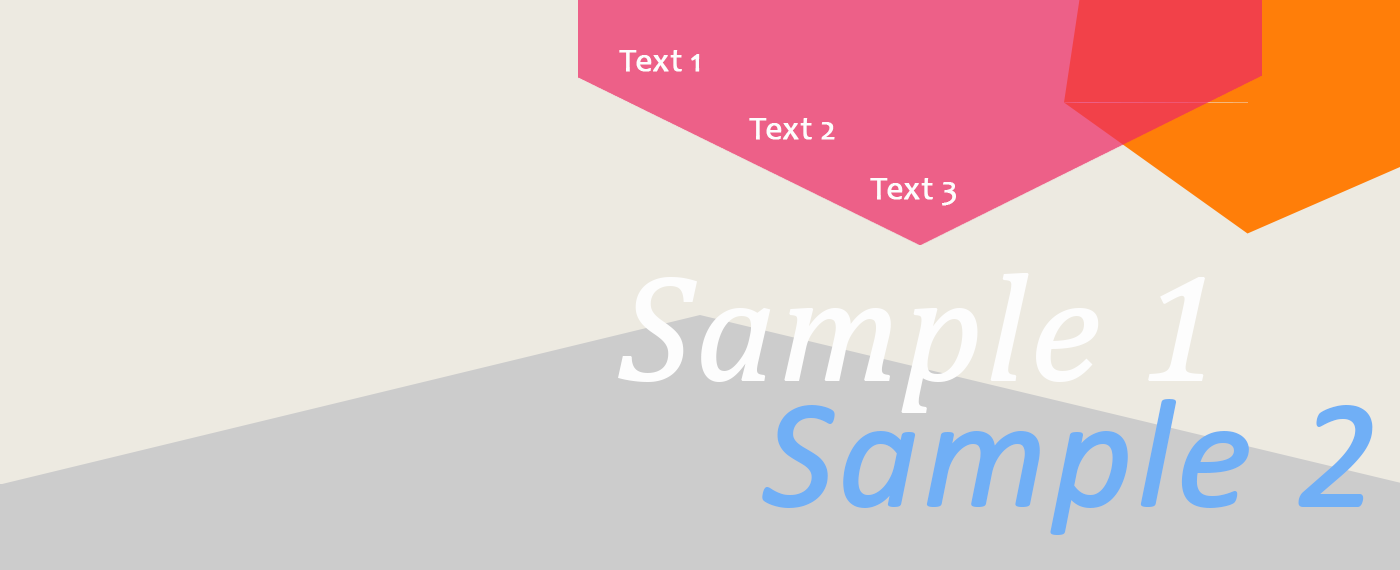
<style>
.page{position:relative;width:1400px;height:570px;background:#edeae1}
.page>*{position:absolute;margin:0}
.t1{font:32.6px "Candara";color:#fdfdfd;font-weight:bold}
.t2{font:150.5px "Cambria-Italic";color:#fdfdfd;font-weight:bold}
.t3{font:157.4px "Calibri-Italic";color:#70aff6;font-weight:bold}
</style>
<div class="page">
<p class="t1" style="left:619px;top:50px;width:81px;height:22px">Text 1</p>
<p class="t1" style="left:749px;top:118px;width:86px;height:22px">Text 2</p>
<p class="t1" style="left:870px;top:178px;width:86px;height:28px">Text 3</p>
<p class="t2" style="left:618px;top:273px;width:587px;height:140px">Sample 1</p>
<p class="t3" style="left:762px;top:399px;width:611px;height:136px">Sample 2</p>
</div>
